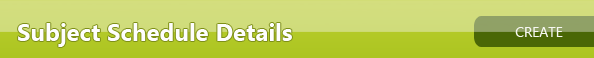
<style>
.page{position:relative;width:594px;height:58px}
.page>*{position:absolute;margin:0}
.t1{font:24px "SegoeUI-Bold";color:#fefefe}
.t2{font:14px "SegoeUI";color:#f6f7f1}
</style>
<div class="page">
<p class="t1" style="left:18px;top:23px;width:274px;height:24px">Subject Schedule Details</p>
<p class="t2" style="left:515px;top:27px;width:48px;height:10px">CREATE</p>
</div>
